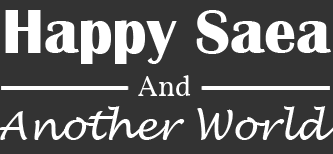
<style>
.page{position:relative;width:333px;height:154px;background:#333333}
.page>*{position:absolute;margin:0}
.t1{font:64.2px "BritannicBold";color:#ffffff}
.t2{font:28.9px "Vollkorn-Regular";color:#ffffff}
</style>
<div class="page">
<p class="t1" style="left:5px;top:10px;width:326px;height:54px">Happy Saea</p>
<p class="t2" style="left:138px;top:75px;width:53px;height:21px">And</p>
</div>
